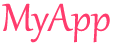
<style>
.page{position:relative;width:130px;height:44px;background:#ffffff}
.page>*{position:absolute;margin:0}
.t1{font:47.4px "Gabriola";color:#ff3c6d}
</style>
<div class="page">
<p class="t1" style="left:2px;top:3px;width:108px;height:40px">MyApp</p>
</div>
